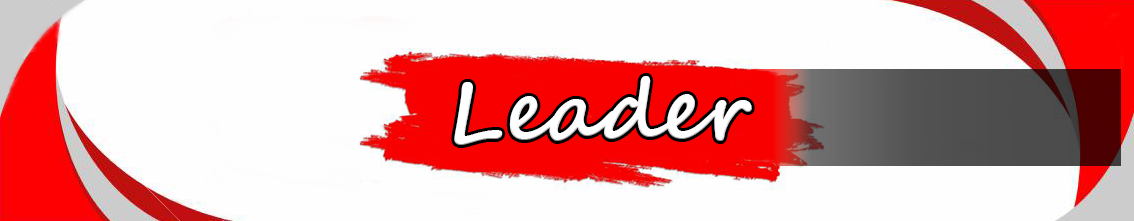
<style>
.page{position:relative;width:1134px;height:221px;background:#fefefe}
.page>*{position:absolute;margin:0}
.t1{font:83.3px "SegoeScript-Bold";color:#ffffff}
</style>
<div class="page">
<p class="t1" style="left:454px;top:76px;width:298px;height:69px">Leader</p>
</div>
